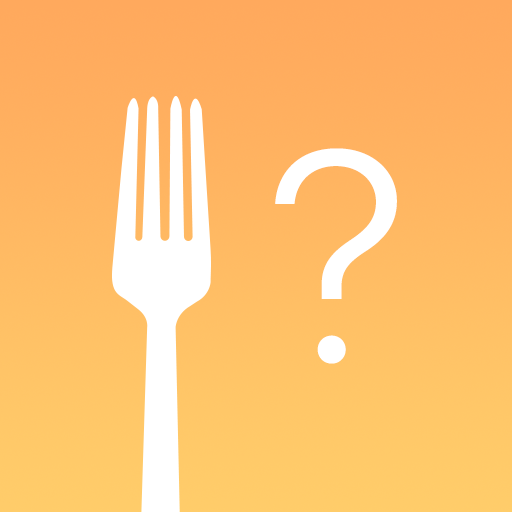
<style>
.page{position:relative;width:512px;height:512px}
.page>*{position:absolute;margin:0}
.t1{font:300px "SFUIDisplay-Light";color:#ffffff}
</style>
<div class="page">
<p class="t1" style="left:275px;top:148px;width:122px;height:216px">?</p>
</div>
